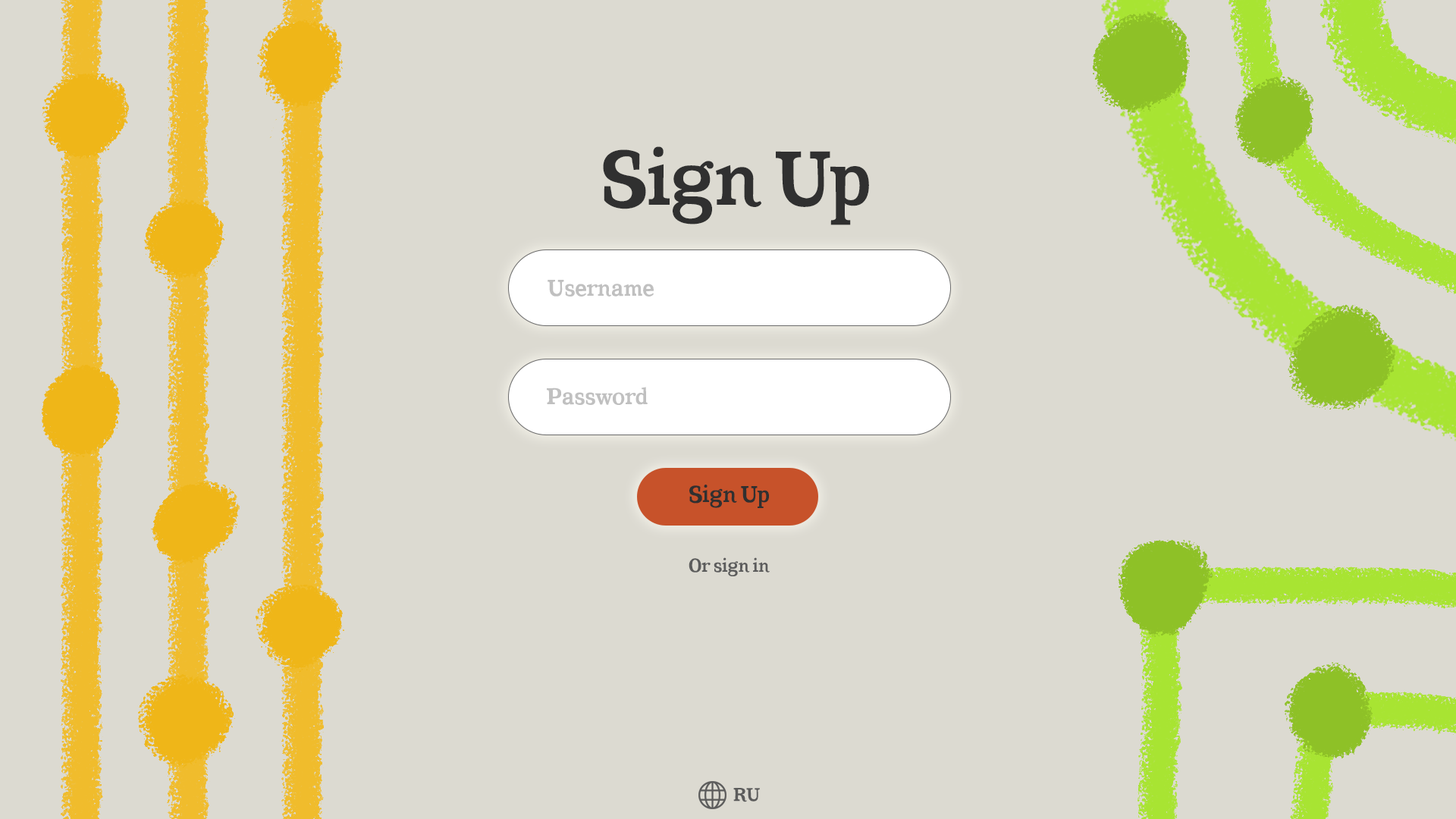
<style>
.page{position:relative;width:1456px;height:819px;background:#dcdad1}
.page>*{position:absolute;margin:0}
.t1{font:75.8px "CoatsBold-Bold";color:#303030}
.t2{font:22.7px "CoatsBold-Bold";color:#c0c0c0}
.t3{font:22.7px "CoatsBold-Bold";color:#303030}
.t4{font:18.2px "CoatsBold-Bold";color:#5c5c5c}
</style>
<div class="page">
<p class="t1" style="left:603px;top:146px;width:266px;height:79px">Sign Up</p>
<p class="t2" style="left:548px;top:280px;width:106px;height:17px">Username</p>
<p class="t2" style="left:547px;top:387px;width:101px;height:18px">Password</p>
<p class="t3" style="left:689px;top:485px;width:80px;height:23px">Sign Up</p>
<p class="t4" style="left:689px;top:557px;width:81px;height:19px">Or sign in</p>
<p class="t4" style="left:733px;top:788px;width:27px;height:14px">RU</p>
</div>
